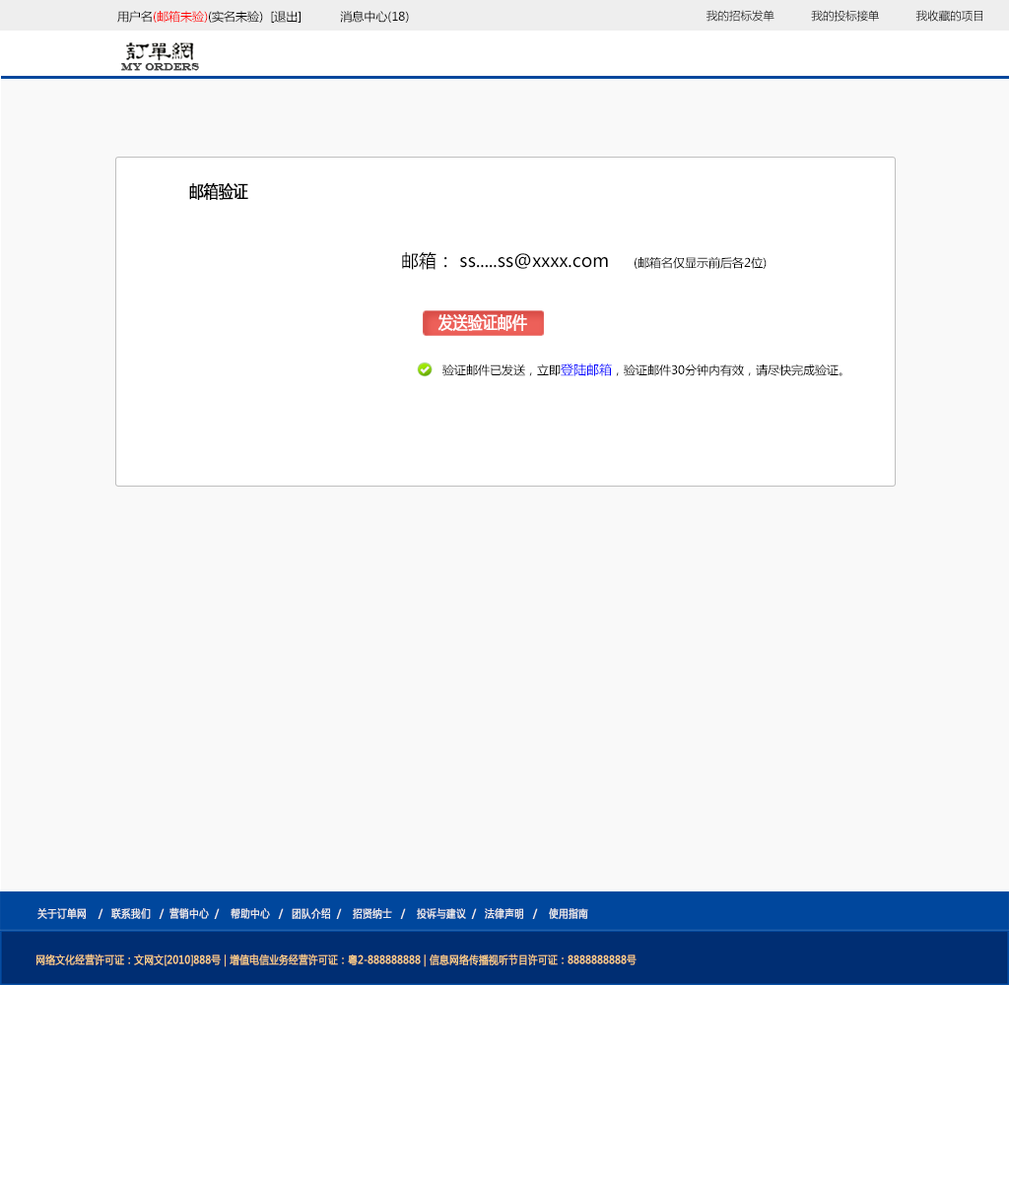
<style>
.page{position:relative;width:1009px;height:1182px;background:#f9f9f9}
.page>*{position:absolute;margin:0}
.t1{font:11.8px "MicrosoftYaHei";color:#000000}
.t2{font:11.8px "MicrosoftYaHei";color:#ff0000}
.t3{font:11.3px "MicrosoftYaHei";color:#000000}
.t4{font:10.8px "EngraversMT";color:#434343;font-variant:small-caps;font-weight:bold;scale:0.86 1}
.t5{font:17.2px "MicrosoftYaHei";color:#000000;font-variant:small-caps;font-weight:bold;scale:0.86 1}
.t6{font:17.7px "MicrosoftYaHei";color:#000000}
.t7{font:17.2px "MicrosoftYaHei";color:#ffffff;font-variant:small-caps;font-weight:bold;scale:0.86 1}
.t8{font:12.8px "MicrosoftYaHei";color:#0000ff}
.t9{font:10.8px "MicrosoftYaHei";color:#eeeeee;font-variant:small-caps;font-weight:bold;scale:0.86 1}
.t10{font:15.2px "STXihei";color:#eeeeee;font-variant:small-caps;font-weight:bold;scale:0.86 1}
.t11{font:10.8px "MicrosoftYaHei";color:#facd89;font-variant:small-caps;font-weight:bold;scale:0.87 1}
.t12{font:10.8px "MicrosoftYaHei";color:#eeeeee;font-variant:small-caps;font-weight:bold;scale:0.87 1}
</style>
<div class="page">
<p class="t1" style="left:117px;top:11px;width:292px;height:12px">用户名<span class="t2">(邮箱未验)</span>(实名未验)  [退出]           消息中心(18)</p>
<p class="t3" style="left:706px;top:10px;width:276px;height:12px">我的招标发单           我的投标接单           我收藏的项目</p>
<p class="t4" style="left:121px;top:63px;width:78px;height:8px">MY ORDERS</p>
<p class="t5" style="left:189px;top:183px;width:59px;height:17px">邮箱验证</p>
<p class="t6" style="left:402px;top:252px;width:206px;height:18px">邮箱： ss.....ss@xxxx.com</p>
<p class="t1" style="left:634px;top:257px;width:132px;height:12px">(邮箱名仅显示前后各2位)</p>
<p class="t7" style="left:437px;top:314px;width:90px;height:17px">发送验证邮件</p>
<p class="t1" style="left:442px;top:363px;width:400px;height:13px">验证邮件已发送，立即<span class="t8">登陆邮箱</span>，验证邮件30分钟内有效，请尽快完成验证。</p>
<p class="t9" style="left:37px;top:907px;width:551px;height:12px"><span class="t10"><br><br></span>关于订单网    /   联系我们   /  营销中心  /    帮助中心   /   团队介绍  /    招贤纳士   /    投诉与建议  /   法律声明   /    使用指南</p>
<p class="t11" style="left:36px;top:954px;width:600px;height:13px"><span class="t12"> </span>网络文化经营许可证：文网文[2010]888号 | 增值电信业务经营许可证：粤2-888888888 | 信息网络传播视听节目许可证：8888888888号</p>
</div>
